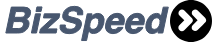
<style>
.page{position:relative;width:213px;height:42px;background:#ffffff}
.page>*{position:absolute;margin:0}
.t1{font:36px "Helvetica-BoldOblique";color:#48576f}
</style>
<div class="page">
<p class="t1" style="left:4px;top:5px;width:166px;height:37px">BizSpeed</p>
</div>
